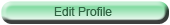
<style>
.page{position:relative;width:170px;height:25px}
.page>*{position:absolute;margin:0}
.t1{font:12px "ArialMT";color:#326544}
</style>
<div class="page">
<p class="t1" style="left:54px;top:7px;width:58px;height:9px">Edit Profile</p>
</div>
